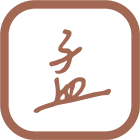
<style>
.page{position:relative;width:140px;height:140px;background:#ffffff}
.page>*{position:absolute;margin:0}
.t1{font:108.1px "ChenYuluoyan-Thin";color:#a26853}
</style>
<div class="page">
<p class="t1" style="left:33px;top:29px;width:78px;height:84px">孟</p>
</div>
